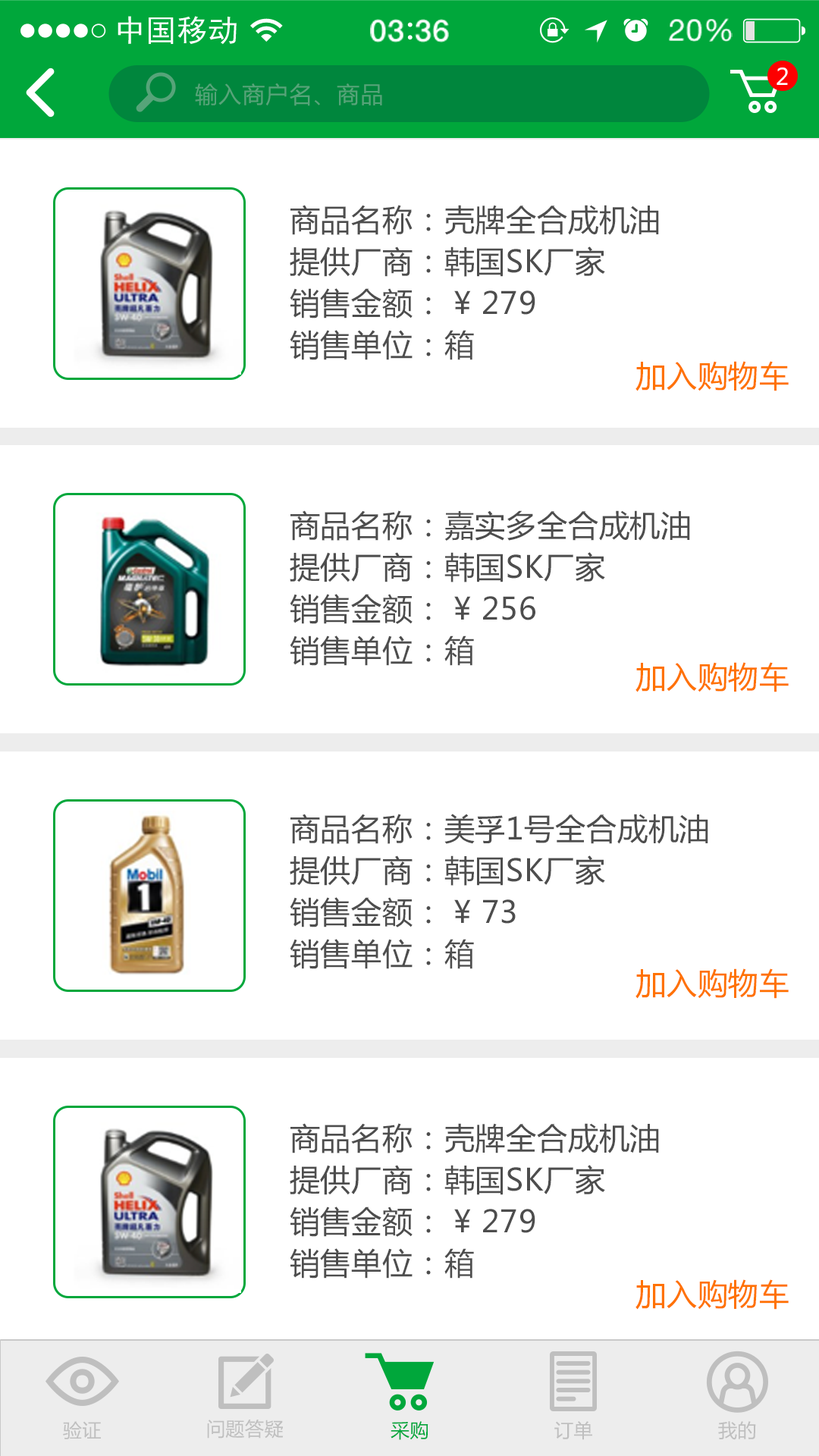
<style>
.page{position:relative;width:819px;height:1456px;background:#ffffff}
.page>*{position:absolute;margin:0}
.t1{font:22.7px "MicrosoftYaHei";letter-spacing:0.02em;color:#ffffff}
.t2{font:22.7px "MicrosoftYaHei";letter-spacing:0.04em;color:#56a479}
.t3{font:30.3px/41.7px "MicrosoftYaHei";letter-spacing:0.02em;color:#4d4d4d}
.t4{font:30.3px "MicrosoftYaHei";letter-spacing:0.02em;color:#ff7200}
.t5{font:18.9px "MicrosoftYaHei";letter-spacing:0.02em;color:#bfbfbf}
.t6{font:18.9px "MicrosoftYaHei";letter-spacing:0.02em;color:#00a73b}
</style>
<div class="page">
<p class="t1" style="left:777px;top:67px;width:11px;height:18px">2</p>
<p class="t2" style="left:195px;top:83px;width:187px;height:23px">输入商户名、商品</p>
<p class="t3" style="left:290px;top:205px;width:369px;height:155px">商品名称：壳牌全合成机油<br>提供厂商：韩国SK厂家<br>销售金额： ¥ 279<br>销售单位：箱</p>
<p class="t4" style="left:635px;top:361px;width:154px;height:30px">加入购物车</p>
<p class="t3" style="left:290px;top:510px;width:400px;height:156px">商品名称：嘉实多全合成机油<br>提供厂商：韩国SK厂家<br>销售金额： ¥ 256<br>销售单位：箱</p>
<p class="t4" style="left:635px;top:662px;width:154px;height:30px">加入购物车</p>
<p class="t3" style="left:290px;top:814px;width:418px;height:155px">商品名称：美孚1号全合成机油<br>提供厂商：韩国SK厂家<br>销售金额： ¥ 73<br>销售单位：箱</p>
<p class="t4" style="left:635px;top:968px;width:154px;height:31px">加入购物车</p>
<p class="t3" style="left:290px;top:1123px;width:369px;height:156px">商品名称：壳牌全合成机油<br>提供厂商：韩国SK厂家<br>销售金额： ¥ 279<br>销售单位：箱</p>
<p class="t4" style="left:635px;top:1279px;width:154px;height:31px">加入购物车</p>
<p class="t5" style="left:63px;top:1421px;width:38px;height:18px">验证</p>
<p class="t5" style="left:207px;top:1420px;width:77px;height:19px">问题答疑</p>
<p class="t6" style="left:391px;top:1421px;width:37px;height:19px">采购</p>
<p class="t5" style="left:554px;top:1421px;width:38px;height:19px">订单</p>
<p class="t5" style="left:718px;top:1421px;width:38px;height:19px">我的</p>
</div>
